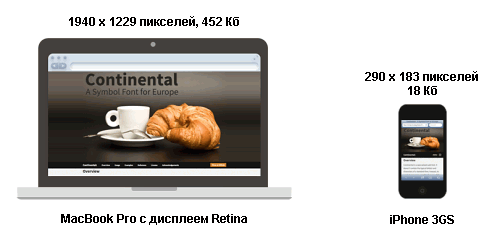
<style>
.page{position:relative;width:500px;height:250px;background:#ffffff}
.page>*{position:absolute;margin:0}
.t1{font:12px "Arial-BoldMT";color:#020000}
.t2{font:12px/14px "Arial-BoldMT";color:#020000}
</style>
<div class="page">
<p class="t1" style="left:69px;top:16px;width:170px;height:12px">1940 x 1229 пикселей, 452 Кб</p>
<p class="t2" style="left:365px;top:71px;width:113px;height:24px;text-align:center">290 x 183 пикселей<br>18 Кб</p>
<p class="t1" style="left:61px;top:214px;width:186px;height:11px">MacBook Pro с дисплеем Retina</p>
<p class="t1" style="left:390px;top:215px;width:64px;height:9px">iPhone 3GS</p>
</div>
